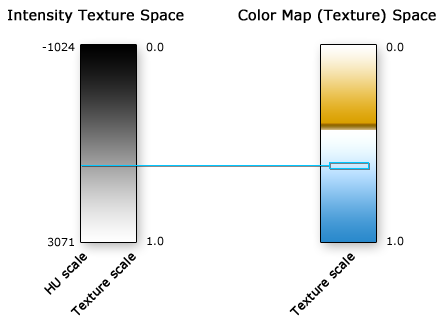
<style>
.page{position:relative;width:446px;height:327px;background:#ffffff}
.page>*{position:absolute;margin:0}
.t1{font:14px "Verdana";color:#000000;font-weight:bold}
.t2{font:11px "Verdana";color:#000000}
.t3{font:12px "Verdana";color:#000000;font-weight:bold}
</style>
<div class="page">
<p class="t1" style="left:8px;top:9px;width:176px;height:14px">Intensity Texture Space</p>
<p class="t1" style="left:238px;top:9px;width:198px;height:14px">Color Map (Texture) Space</p>
<p class="t2" style="left:42px;top:42px;width:33px;height:10px">-1024</p>
<p class="t2" style="left:146px;top:42px;width:18px;height:10px">0.0</p>
<p class="t2" style="left:386px;top:42px;width:18px;height:10px">0.0</p>
<p class="t2" style="left:48px;top:237px;width:26px;height:10px">3071</p>
<p class="t2" style="left:147px;top:236px;width:17px;height:10px">1.0</p>
<p class="t2" style="left:387px;top:236px;width:17px;height:10px">1.0</p>
<p class="t3" style="left:44px;top:253px;width:43px;height:42px;rotate:-45deg">HU scale</p>
<p class="t3" style="left:70px;top:253px;width:66px;height:63px;rotate:-45deg">Texture scale</p>
<p class="t3" style="left:289px;top:253px;width:66px;height:63px;rotate:-45deg">Texture scale</p>
</div>
